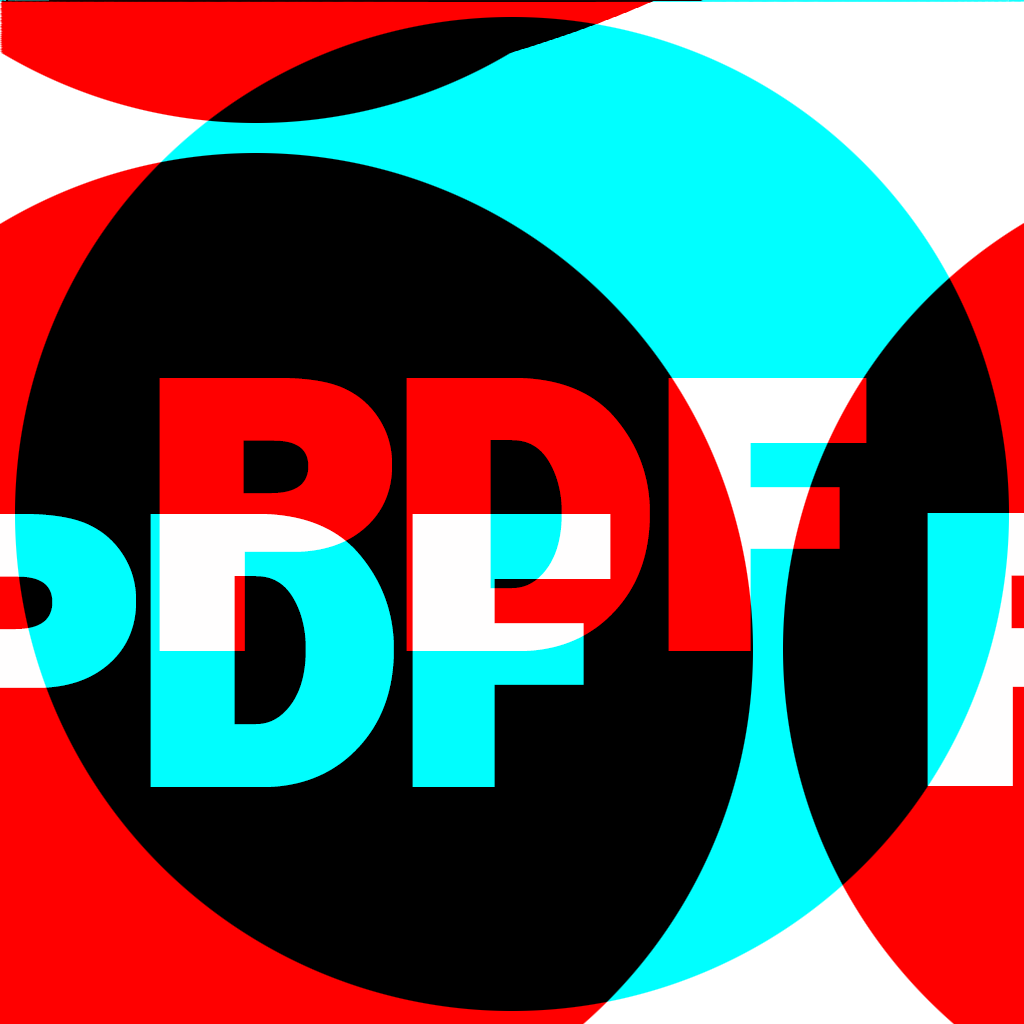
<style>
.page{position:relative;width:1024px;height:1024px;background:#000000}
.page>*{position:absolute;margin:0}
.t1{font:409.7px "FranklinGothic-Heavy";letter-spacing:-0.04em}
</style>
<div class="page">
<p class="t1" style="left:159px;top:376px;width:708px;height:273px">PDF</p>
</div>
